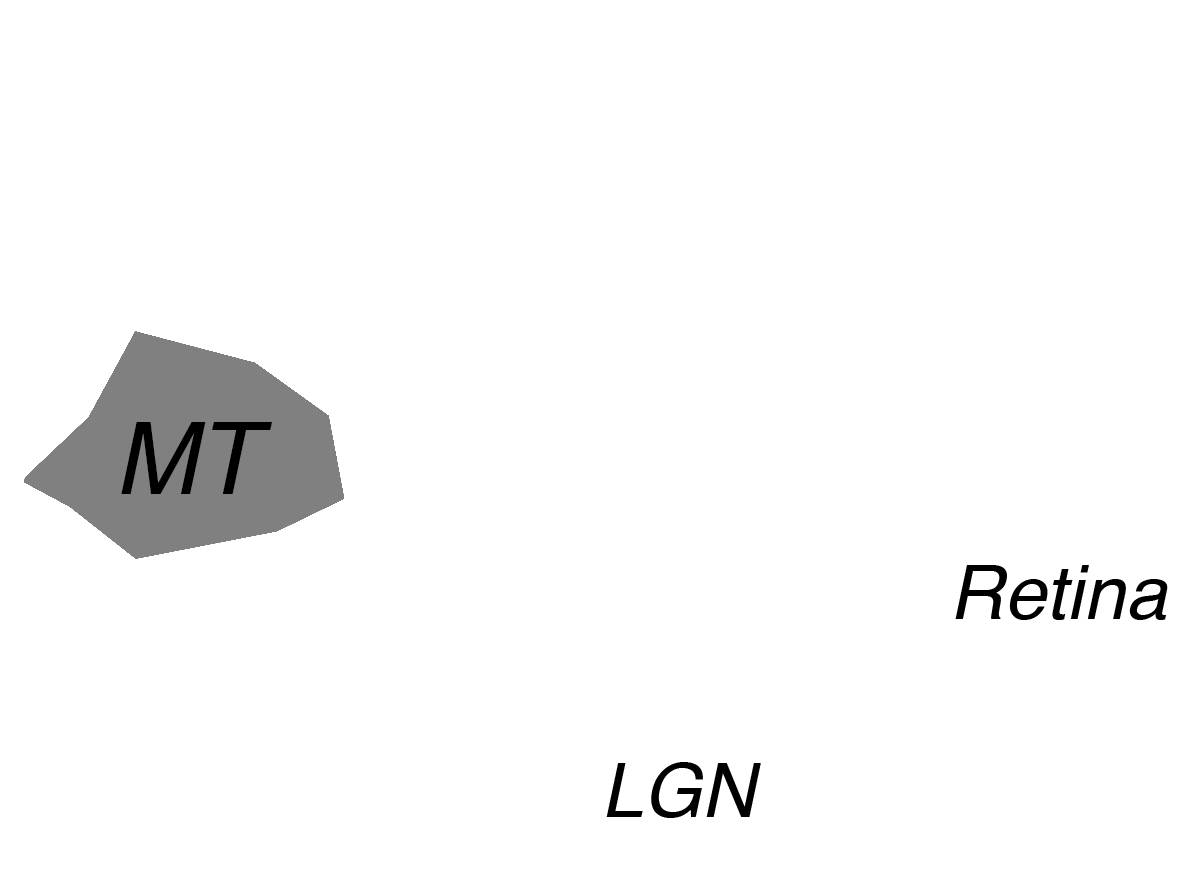
<style>
.page{position:relative;width:1183px;height:880px;background:#ffffff}
.page>*{position:absolute;margin:0}
.t1{font:100px "Helvetica-Oblique";color:#000000}
.t2{font:75px "Helvetica-Oblique";color:#000000}
</style>
<div class="page">
<p class="t1" style="left:121px;top:422px;width:151px;height:72px">MT</p>
<p class="t2" style="left:955px;top:565px;width:213px;height:55px">Retina</p>
<p class="t2" style="left:606px;top:762px;width:155px;height:56px">LGN</p>
</div>
